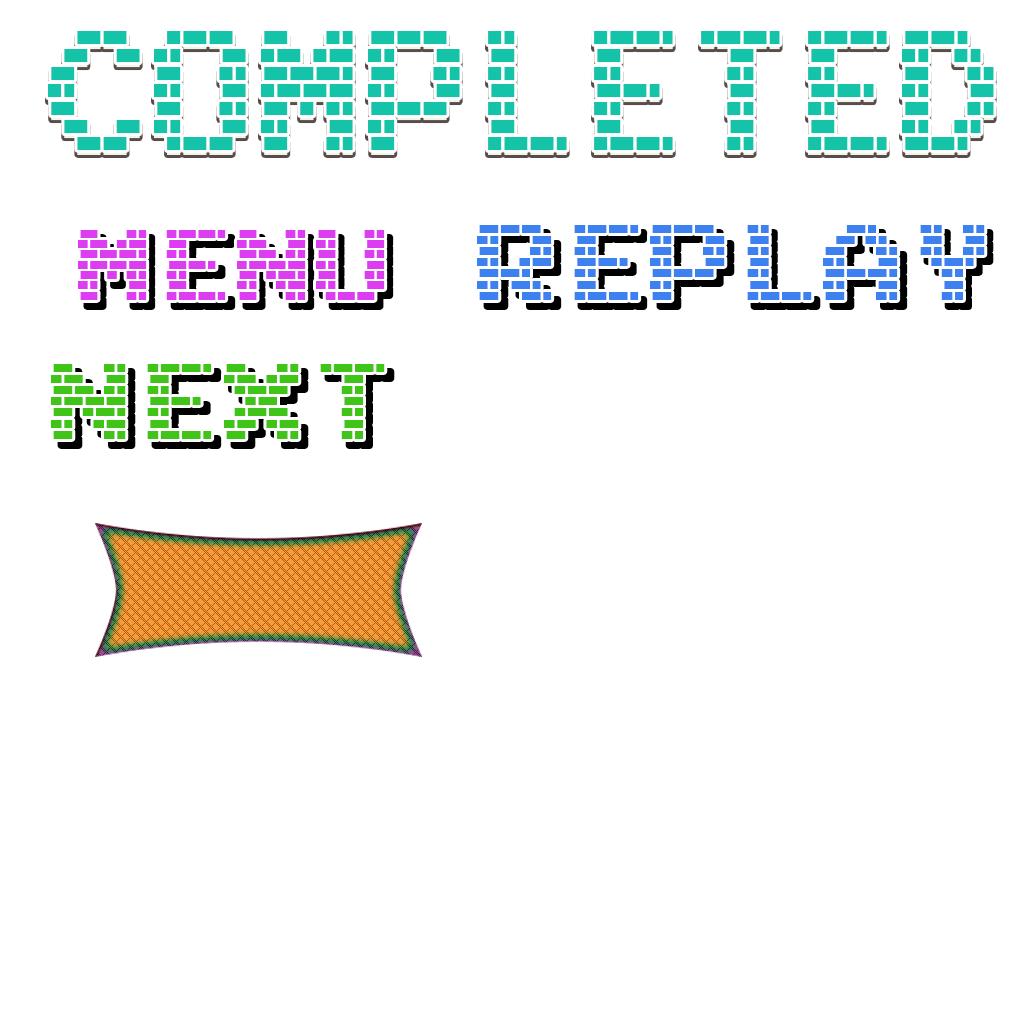
<style>
.page{position:relative;width:1024px;height:1024px;background:#ffffff}
.page>*{position:absolute;margin:0}
.t1{font:141.3px "M10_BATTLE-CITIES";letter-spacing:0.02em;scale:0.74 1}
.t2{font:141.3px "M10_BATTLE-CITIES";letter-spacing:0.02em;color:#14c3a8;scale:0.74 1}
.t3{font:82.7px "M10_BATTLE-CITIES";letter-spacing:0.02em;color:#dd3df0;scale:0.94 1}
.t4{font:89.7px "M10_BATTLE-CITIES";letter-spacing:0.02em;color:#3d81f0;scale:0.95 1}
.t5{font:89.7px "M10_BATTLE-CITIES";letter-spacing:0.02em;color:#40c417;scale:0.95 1}
</style>
<div class="page">
<p class="t1" style="left:48px;top:36px;width:946px;height:119px">COMPLETED</p>
<p class="t2" style="left:48px;top:31px;width:946px;height:119px">COMPLETED</p>
<p class="t3" style="left:78px;top:230px;width:307px;height:70px">MENU</p>
<p class="t4" style="left:477px;top:225px;width:508px;height:75px">REPLAY</p>
<p class="t5" style="left:51px;top:364px;width:334px;height:75px">NEXT</p>
</div>
